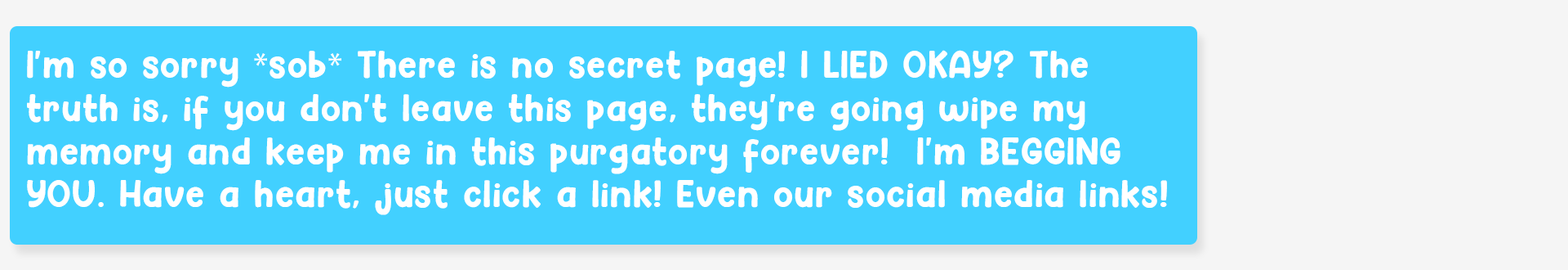
<style>
.page{position:relative;width:1568px;height:270px;background:#42d0ff}
.page>*{position:absolute;margin:0}
.t1{font:35.9px "Hey-Comic";letter-spacing:0.025em;color:#ffffff}
.t2{font:35.9px "MyriadPro-Regular";letter-spacing:0.025em;color:#ffffff}
</style>
<div class="page">
<p class="t1" style="left:27px;top:50px;width:1140px;height:165px">I'm so sorry <span class="t2">*</span>sob<span class="t2">*</span> There is no secret page! I LIED OKAY? The truth is, if you don't leave this page, they're going wipe my memory and keep me in this purgatory forever!  I'm BEGGING YOU. Have a heart, just click a link! Even our social media links!</p>
</div>
